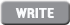
<style>
.page{position:relative;width:70px;height:25px;background:#919296}
.page>*{position:absolute;margin:0}
.t1{font:11px "HeadlineR-HM";letter-spacing:-0.02em;color:#f9fafc}
</style>
<div class="page">
<p class="t1" style="left:15px;top:8px;width:39px;height:10px">WRITE</p>
</div>
